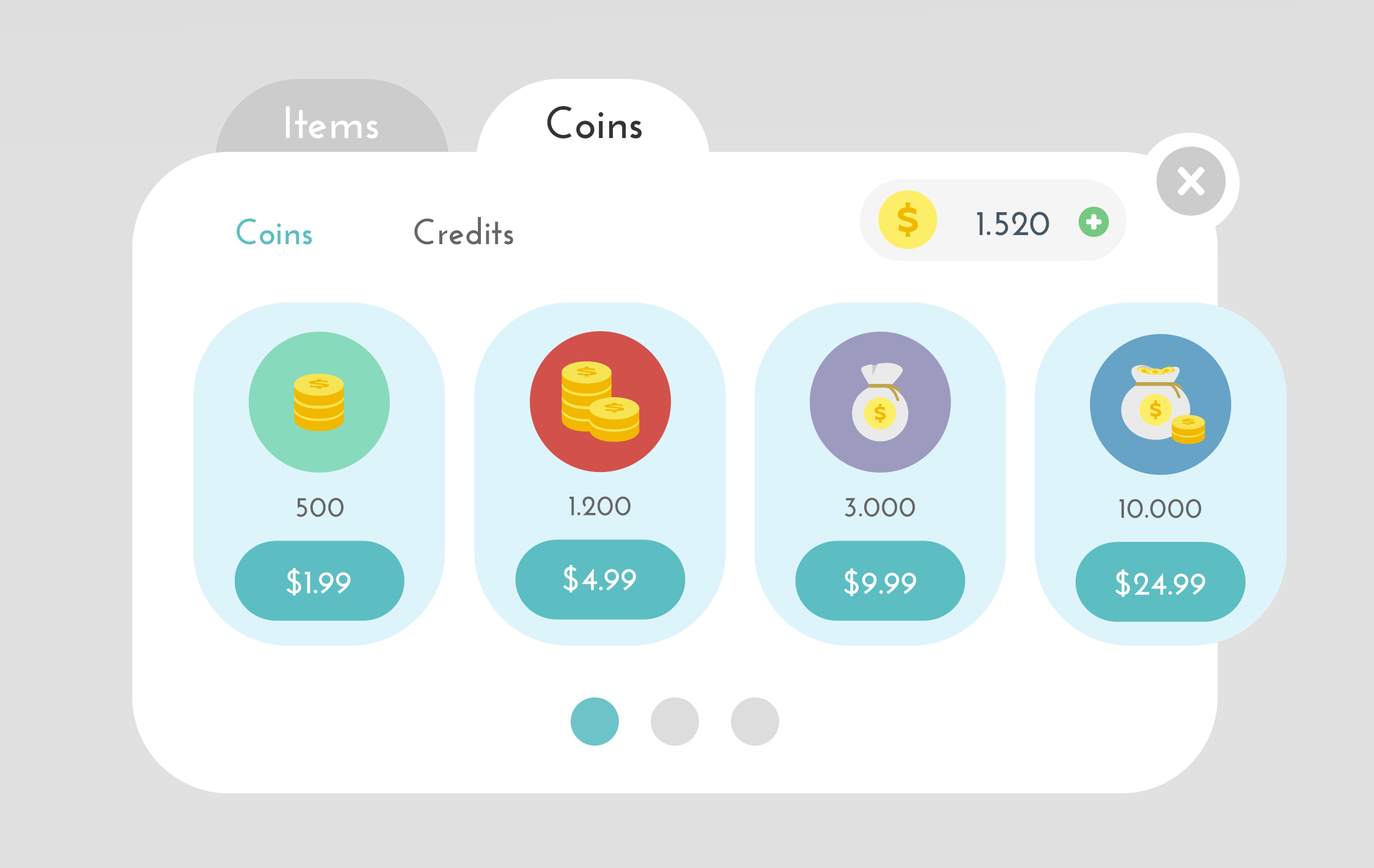
<style>
.page{position:relative;width:1374px;height:868px;background:#ffffff}
.page>*{position:absolute;margin:0}
.t1{font:45.2px "JosefinSans-Bold";color:#ffffff}
.t2{font:45.2px "JosefinSans-Bold";color:#333333}
.t3{font:36.2px "JosefinSans-Bold";color:#5bbec1}
.t4{font:36.2px "JosefinSans-Bold";color:#666666}
.t5{font:35.2px "JosefinSans-Bold";color:#455765}
.t6{font:28.5px "JosefinSans-Bold";color:#666666}
.t7{font:33px "JosefinSans-Bold";color:#ffffff}
.t8{font:32.9px "JosefinSans-Bold";color:#ffffff}
</style>
<div class="page">
<p class="t1" style="left:286px;top:106px;width:92px;height:33px">Items</p>
<p class="t2" style="left:547px;top:106px;width:95px;height:33px">Coins</p>
<p class="t3" style="left:236px;top:218px;width:76px;height:27px">Coins</p>
<p class="t4" style="left:414px;top:217px;width:99px;height:28px">Credits</p>
<p class="t5" style="left:977px;top:212px;width:72px;height:24px">1.520</p>
<p class="t6" style="left:297px;top:498px;width:47px;height:19px">500</p>
<p class="t6" style="left:570px;top:496px;width:61px;height:20px">1.200</p>
<p class="t6" style="left:844px;top:497px;width:71px;height:20px">3.000</p>
<p class="t6" style="left:1119px;top:499px;width:83px;height:19px">10.000</p>
<p class="t7" style="left:286px;top:568px;width:65px;height:27px">$1.99</p>
<p class="t7" style="left:563px;top:565px;width:73px;height:27px">$4.99</p>
<p class="t7" style="left:844px;top:568px;width:73px;height:28px">$9.99</p>
<p class="t8" style="left:1116px;top:569px;width:89px;height:28px">$24.99</p>
</div>
